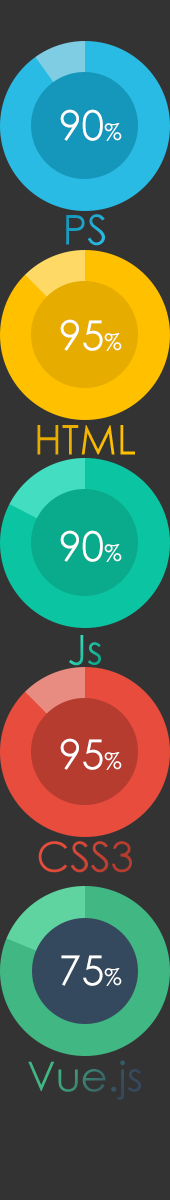
<style>
.page{position:relative;width:170px;height:1200px;background:#333333}
.page>*{position:absolute;margin:0}
.t1{font:41px "CenturyGothic";color:#ffffff}
.t2{font:23px "CenturyGothic";color:#ffffff}
.t3{font:41px "CenturyGothic";color:#1ca3c9}
.t4{font:41px "CenturyGothic";color:#f0b400}
.t5{font:41px "CenturyGothic";color:#23c1a4}
.t6{font:41px "CenturyGothic"}
</style>
<div class="page">
<p class="t1" style="left:60px;top:109px;width:62px;height:32px">90<span class="t2">%</span></p>
<p class="t3" style="left:66px;top:214px;width:39px;height:32px">PS</p>
<p class="t1" style="left:60px;top:319px;width:62px;height:32px">95<span class="t2">%</span></p>
<p class="t4" style="left:37px;top:425px;width:98px;height:30px">HTML</p>
<p class="t1" style="left:60px;top:530px;width:62px;height:32px">90<span class="t2">%</span></p>
<p class="t5" style="left:69px;top:635px;width:32px;height:31px">Js</p>
<p class="t1" style="left:60px;top:738px;width:62px;height:32px">95<span class="t2">%</span></p>
<p class="t6" style="left:38px;top:841px;width:94px;height:32px">CSS3</p>
<p class="t1" style="left:61px;top:955px;width:61px;height:31px">75<span class="t2">%</span></p>
<p class="t6" style="left:28px;top:1060px;width:113px;height:40px">Vue.js</p>
</div>
